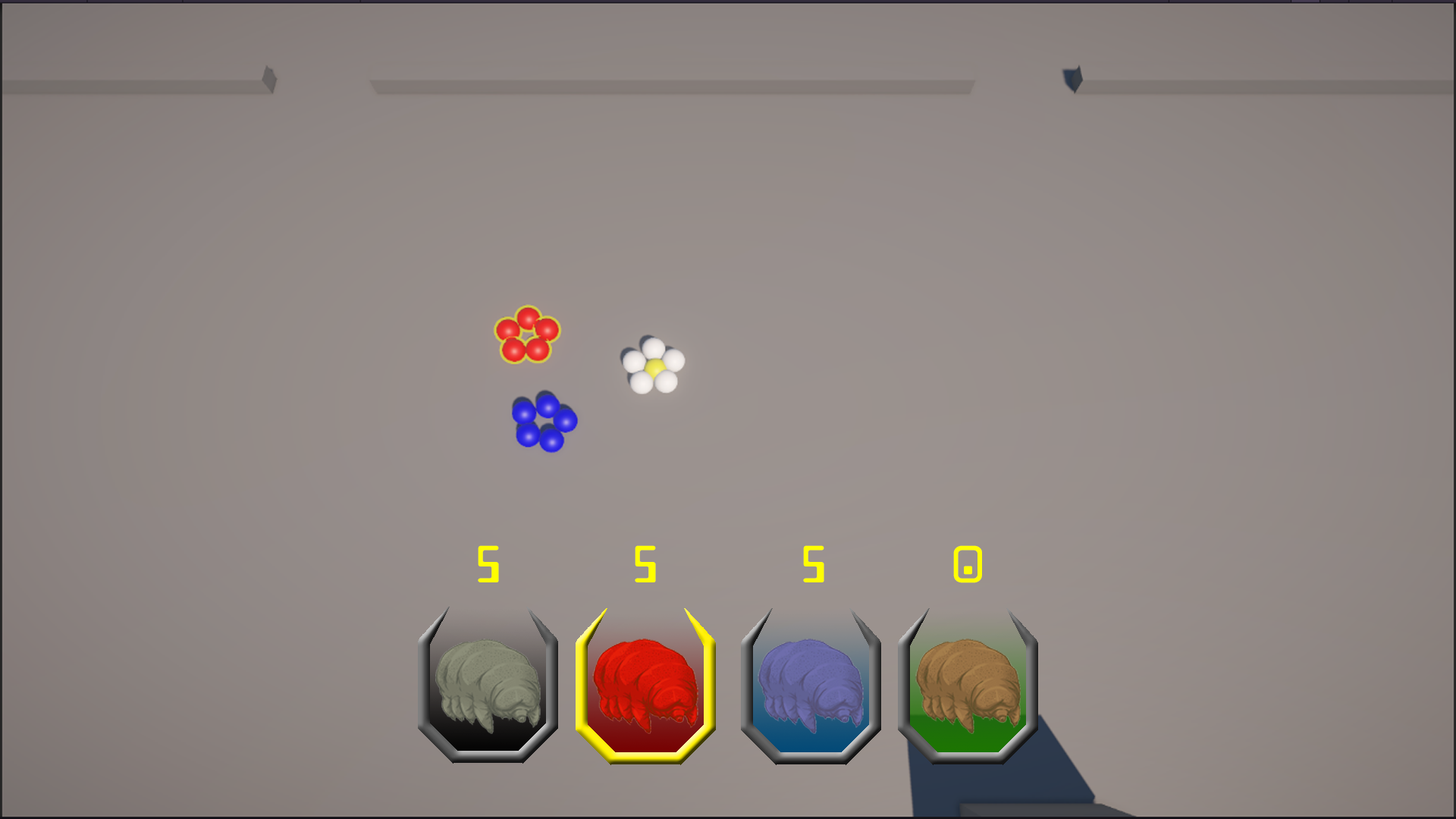
<style>
.page{position:relative;width:1456px;height:819px}
.page>*{position:absolute;margin:0}
.t1{font:44.2px "Checkbook";color:#ffff00}
</style>
<div class="page">
<p class="t1" style="left:478px;top:545px;width:21px;height:37px">5</p>
<p class="t1" style="left:635px;top:545px;width:21px;height:37px">5</p>
<p class="t1" style="left:803px;top:545px;width:21px;height:37px">5</p>
<p class="t1" style="left:953px;top:545px;width:29px;height:38px">0</p>
</div>
